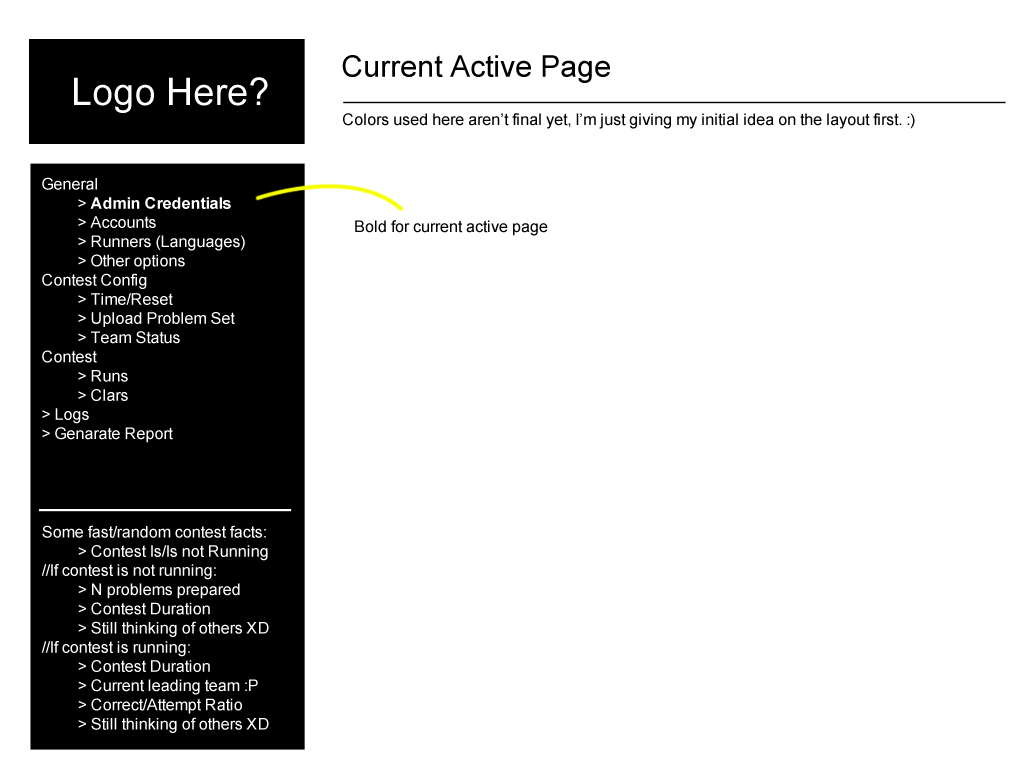
<style>
.page{position:relative;width:1024px;height:768px;background:#ffffff}
.page>*{position:absolute;margin:0}
.t1{font:30px "ArialMT";color:#000000}
.t2{font:38px "ArialMT";color:#ffffff}
.t3{font:16px "ArialMT";color:#000000}
.t4{font:16px "ArialMT";color:#ffffff}
.t5{font:16px "Arial-BoldMT";color:#ffffff}
</style>
<div class="page">
<p class="t1" style="left:342px;top:55px;width:268px;height:28px">Current Active Page</p>
<p class="t2" style="left:74px;top:77px;width:194px;height:36px">Logo Here?</p>
<p class="t3" style="left:343px;top:113px;width:572px;height:16px">Colors used here aren’t final yet, I’m just giving my initial idea on the layout first. :)</p>
<p class="t4" style="left:42px;top:177px;width:203px;height:266px">General<br> &gt; <span class="t5">Admin Credentials<br></span> &gt; Accounts<br> &gt; Runners (Languages)<br> &gt; Other options<br>Contest Config<br> &gt; Time/Reset<br> &gt; Upload Problem Set<br> &gt; Team Status<br>Contest<br> &gt; Runs<br> &gt; Clars<br>&gt; Logs<br>&gt; Genarate Report</p>
<p class="t3" style="left:355px;top:220px;width:193px;height:16px">Bold for current active page</p>
<p class="t4" style="left:41px;top:525px;width:228px;height:208px">Some fast/random contest facts:<br> &gt; Contest Is/Is not Running<br>//If contest is not running:<br> &gt; N problems prepared<br> &gt; Contest Duration<br> &gt; Still thinking of others XD<br>//If contest is running:<br> &gt; Contest Duration<br> &gt; Current leading team :P<br> &gt; Correct/Attempt Ratio<br> &gt; Still thinking of others XD</p>
</div>
